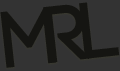
<style>
.page{position:relative;width:120px;height:71px;background:#333333}
.page>*{position:absolute;margin:0}
.t1{font:80px "Code-Bold";letter-spacing:-0.08em;color:#151512}
.t2{font:80px "Code-Bold";letter-spacing:-0.16em;color:#151512}
</style>
<div class="page">
<p class="t1" style="left:0px;top:2px;width:120px;height:66px;rotate:-6deg"><span class="t2">M</span>RL</p>
</div>
